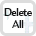
<style>
.page{position:relative;width:36px;height:36px;background:#ffffff}
.page>*{position:absolute;margin:0}
.t1{font:10.7px "AmiraParadiso";letter-spacing:-0.05em;color:#000000}
</style>
<div class="page">
<p class="t1" style="left:4px;top:8px;width:28px;height:20px;text-align:center;opacity:0.96">Delete<br>All</p>
</div>
